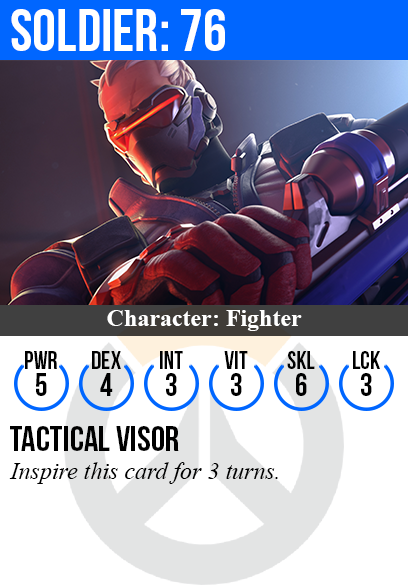
<style>
.page{position:relative;width:408px;height:585px;background:#ffffff}
.page>*{position:absolute;margin:0}
.t1{font:60px "BebasNeue";color:#ffffff}
.t2{font:24px "TimesNewRomanPS-BoldMT";color:#ffffff}
.t3{font:25px "BebasNeue";color:#000000}
.t4{font:32px "BebasNeue";color:#000000}
.t5{font:36px "BebasNeue";color:#000000}
.t6{font:24px "TimesNewRomanPS-ItalicMT";color:#000000}
</style>
<div class="page">
<p class="t1" style="left:11px;top:9px;width:214px;height:42px">soldier: 76</p>
<p class="t2" style="left:107px;top:310px;width:195px;height:21px">Character: Fighter</p>
<p class="t3" style="left:25px;top:351px;width:32px;height:18px">PWR</p>
<p class="t3" style="left:92px;top:351px;width:29px;height:18px">dex</p>
<p class="t3" style="left:160px;top:351px;width:23px;height:18px">int</p>
<p class="t3" style="left:224px;top:351px;width:24px;height:18px">vit</p>
<p class="t3" style="left:287px;top:351px;width:28px;height:18px">skl</p>
<p class="t3" style="left:353px;top:351px;width:27px;height:18px">lck</p>
<p class="t4" style="left:36px;top:373px;width:11px;height:23px">5</p>
<p class="t4" style="left:100px;top:373px;width:13px;height:23px">4</p>
<p class="t4" style="left:166px;top:373px;width:11px;height:23px">3</p>
<p class="t4" style="left:231px;top:373px;width:11px;height:23px">3</p>
<p class="t4" style="left:296px;top:373px;width:11px;height:23px">6</p>
<p class="t4" style="left:361px;top:373px;width:11px;height:23px">3</p>
<p class="t5" style="left:10px;top:426px;width:169px;height:25px">tactical visor</p>
<p class="t6" style="left:9px;top:462px;width:269px;height:22px">Inspire this card for 3 turns.</p>
</div>
